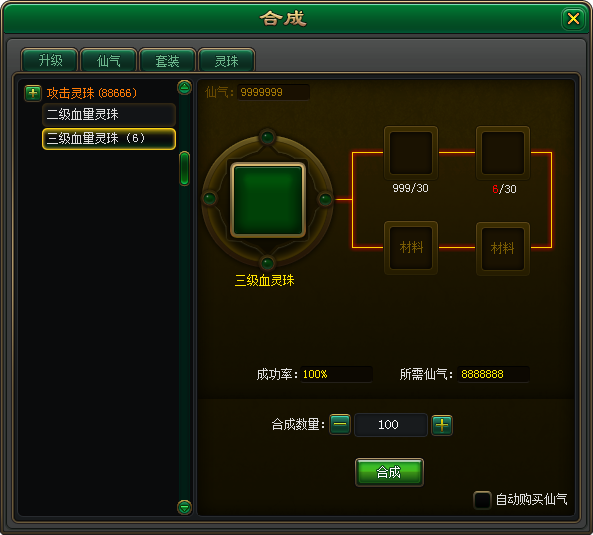
<style>
.page{position:relative;width:593px;height:535px}
.page>*{position:absolute;margin:0}
.t1{font:12px "SimSun";color:#6bb68b}
.t2{font:12px "SimSun";color:#ff7b06}
.t3{font:12px "SimSun";color:#664801}
.t4{font:12px "SimSun";color:#a17602}
.t5{font:12px "SimSun";color:#dedede}
.t6{font:12px "SimSun";color:#ff0000}
.t7{font:12px "SimSun";color:#795b02}
.t8{font:12px "SimSun";color:#ffe400}
.t9{font:12px "SimSun";color:#fff000}
.t10{font:14px "SimSun";color:#ffffff}
.t11{font:12px "SimSun";color:#fffffe}
</style>
<div class="page">
<p class="t1" style="left:39px;top:54px;width:23px;height:12px">升级</p>
<p class="t1" style="left:39px;top:54px;width:23px;height:12px">升级</p>
<p class="t1" style="left:97px;top:55px;width:23px;height:12px">仙气</p>
<p class="t1" style="left:97px;top:55px;width:23px;height:12px">仙气</p>
<p class="t1" style="left:156px;top:55px;width:23px;height:12px">套装</p>
<p class="t1" style="left:156px;top:55px;width:23px;height:12px">套装</p>
<p class="t1" style="left:215px;top:55px;width:23px;height:12px">灵珠</p>
<p class="t1" style="left:215px;top:55px;width:23px;height:12px">灵珠</p>
<p class="t2" style="left:47px;top:87px;width:47px;height:12px">攻击灵珠</p>
<p class="t2" style="left:99px;top:88px;width:37px;height:10px">(88666)</p>
<p class="t3" style="left:205px;top:86px;width:28px;height:12px">仙气：</p>
<p class="t4" style="left:241px;top:88px;width:41px;height:8px">9999999</p>
<p class="t5" style="left:47px;top:108px;width:71px;height:12px">二级血量灵珠</p>
<p class="t5" style="left:47px;top:132px;width:71px;height:12px">三级血量灵珠</p>
<p class="t5" style="left:127px;top:133px;width:17px;height:10px">（6）</p>
<p class="t5" style="left:393px;top:183px;width:35px;height:10px">999/30</p>
<p class="t5" style="left:493px;top:184px;width:23px;height:10px"><span class="t6">6</span>/30</p>
<p class="t7" style="left:400px;top:241px;width:23px;height:12px">材料</p>
<p class="t7" style="left:491px;top:242px;width:23px;height:12px">材料</p>
<p class="t8" style="left:235px;top:274px;width:59px;height:12px">三级血灵珠</p>
<p class="t5" style="left:257px;top:368px;width:40px;height:12px">成功率：</p>
<p class="t8" style="left:304px;top:370px;width:23px;height:8px">100%</p>
<p class="t5" style="left:400px;top:368px;width:52px;height:12px">所需仙气：</p>
<p class="t9" style="left:462px;top:370px;width:41px;height:8px">8888888</p>
<p class="t5" style="left:272px;top:418px;width:52px;height:12px">合成数量：</p>
<p class="t10" style="left:379px;top:420px;width:19px;height:9px">100</p>
<p class="t11" style="left:377px;top:466px;width:23px;height:12px">合成</p>
<p class="t5" style="left:497px;top:493px;width:70px;height:12px">自动购买仙气</p>
</div>
